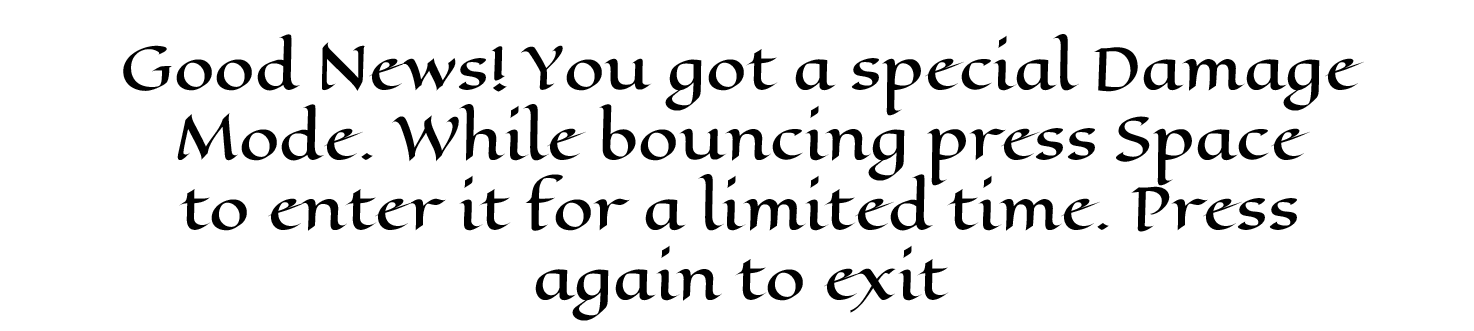
<style>
.page{position:relative;width:1474px;height:331px;background:#ffffff}
.page>*{position:absolute;margin:0}
.t1{font:58.3px "EagleLake-Regular";color:#000000}
</style>
<div class="page">
<p class="t1" style="left:123px;top:34px;width:1241px;height:287px;text-align:center">Good News! You got a special Damage<br>Mode. While bouncing press Space<br>to enter it for a limited time. Press<br>again to exit</p>
</div>
